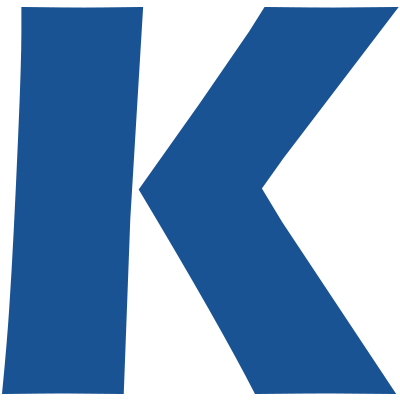
<style>
.page{position:relative;width:400px;height:400px;background:#1a5393}
.page>*{position:absolute;margin:0}
.t1{font:580px "ErasITC-Bold";color:#1a5393;scale:0.96 1}
</style>
<div class="page">
<p class="t1" style="left:2px;top:7px;width:397px;height:387px">K</p>
</div>
